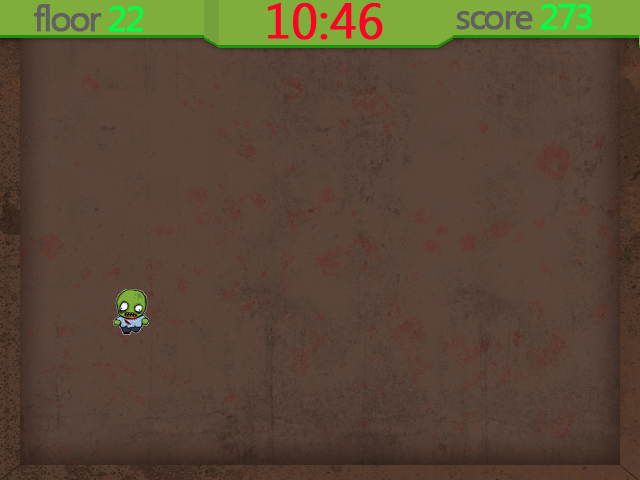
<style>
.page{position:relative;width:640px;height:480px;background:#5b453a}
.page>*{position:absolute;margin:0}
.t1{font:36px "Ebrima";letter-spacing:-0.075em;color:#636061;font-weight:bold}
.t2{font:36px "Ebrima";letter-spacing:-0.075em;color:#00ff48;font-weight:bold}
.t3{font:48px "Ebrima";color:#ff0125;font-weight:bold}
</style>
<div class="page">
<p class="t1" style="left:33px;top:4px;width:111px;height:28px">floor <span class="t2">22</span></p>
<p class="t3" style="left:267px;top:3px;width:116px;height:37px">10:46</p>
<p class="t1" style="left:456px;top:4px;width:136px;height:26px">score <span class="t2">273</span></p>
</div>
